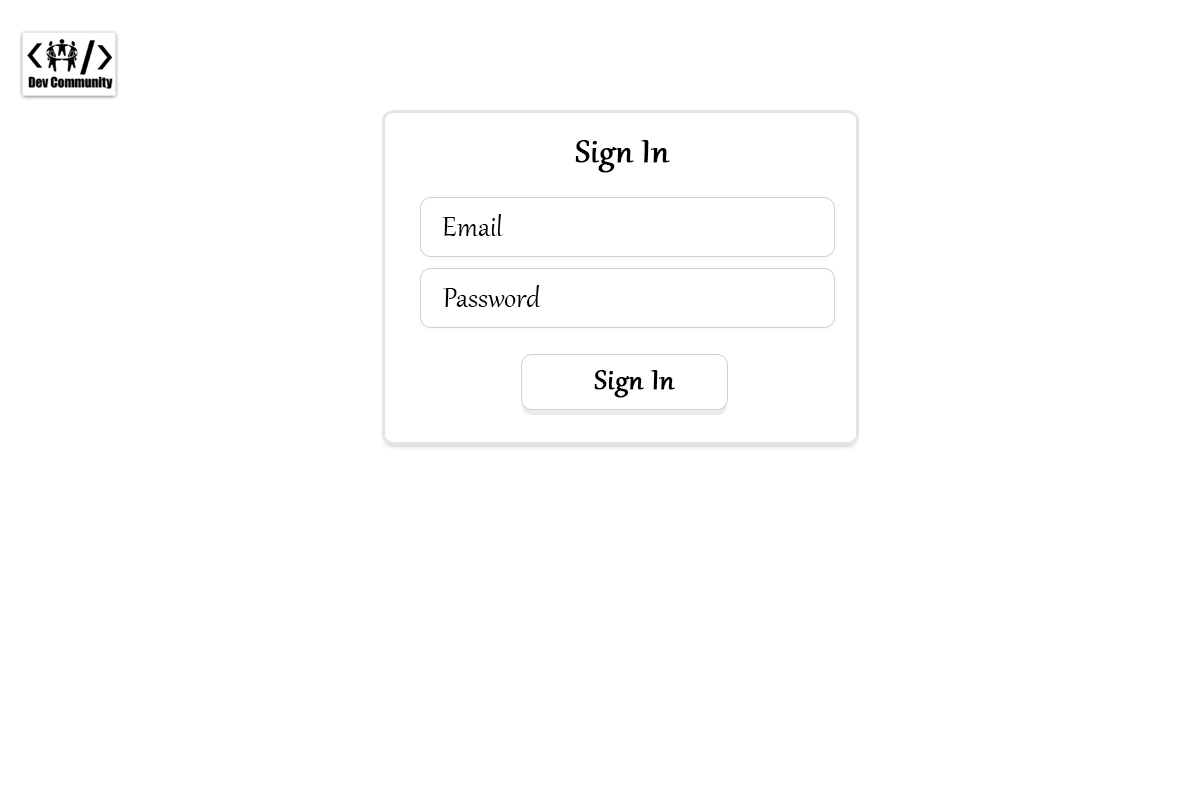
<style>
.page{position:relative;width:1200px;height:800px;background:#ffffff}
.page>*{position:absolute;margin:0}
.t1{font:40px "Gabriola";color:#000000;font-weight:bold}
.t2{font:34px "Gabriola";color:#000000}
.t3{font:34px "Gabriola";color:#000000;font-weight:bold}
</style>
<div class="page">
<p class="t1" style="left:575px;top:140px;width:95px;height:33px">Sign In</p>
<p class="t2" style="left:442px;top:214px;width:61px;height:22px">Email</p>
<p class="t2" style="left:443px;top:285px;width:98px;height:22px">Password</p>
<p class="t3" style="left:594px;top:370px;width:81px;height:28px">Sign In</p>
</div>
